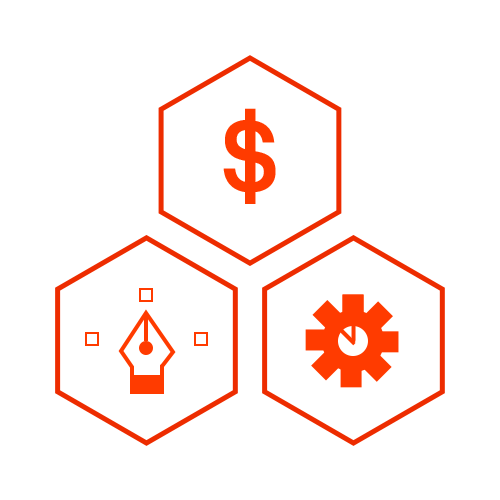
<style>
.page{position:relative;width:500px;height:500px;background:#ffffff}
.page>*{position:absolute;margin:0}
.t1{font:100.5px "AtHaussStd-Medium";color:#ff3b00}
</style>
<div class="page">
<p class="t1" style="left:223px;top:108px;width:53px;height:96px">$</p>
</div>
